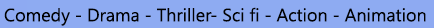
<style>
.page{position:relative;width:434px;height:28px;background:#8eabf2}
.page>*{position:absolute;margin:0}
.t1{font:18px "LaoUI";color:#010101}
</style>
<div class="page">
<p class="t1" style="left:4px;top:7px;width:422px;height:19px">Comedy - Drama - Thriller- Sci fi - Action - Animation</p>
</div>
